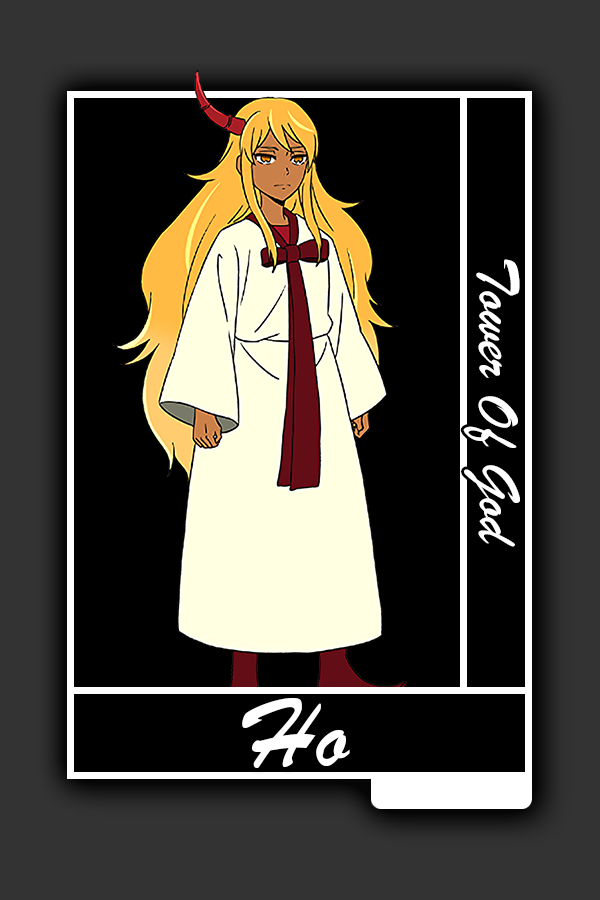
<style>
.page{position:relative;width:600px;height:900px;background:#000000}
.page>*{position:absolute;margin:0}
.t1{font:61.5px "BrushScriptMT";color:#ffffff}
.t2{font:104.4px "BrushScriptMT";color:#ffffff}
</style>
<div class="page">
<p class="t1" style="left:463px;top:259px;width:57px;height:288px;rotate:90deg">Tower Of God</p>
<p class="t2" style="left:242px;top:698px;width:108px;height:70px">Ho</p>
</div>
